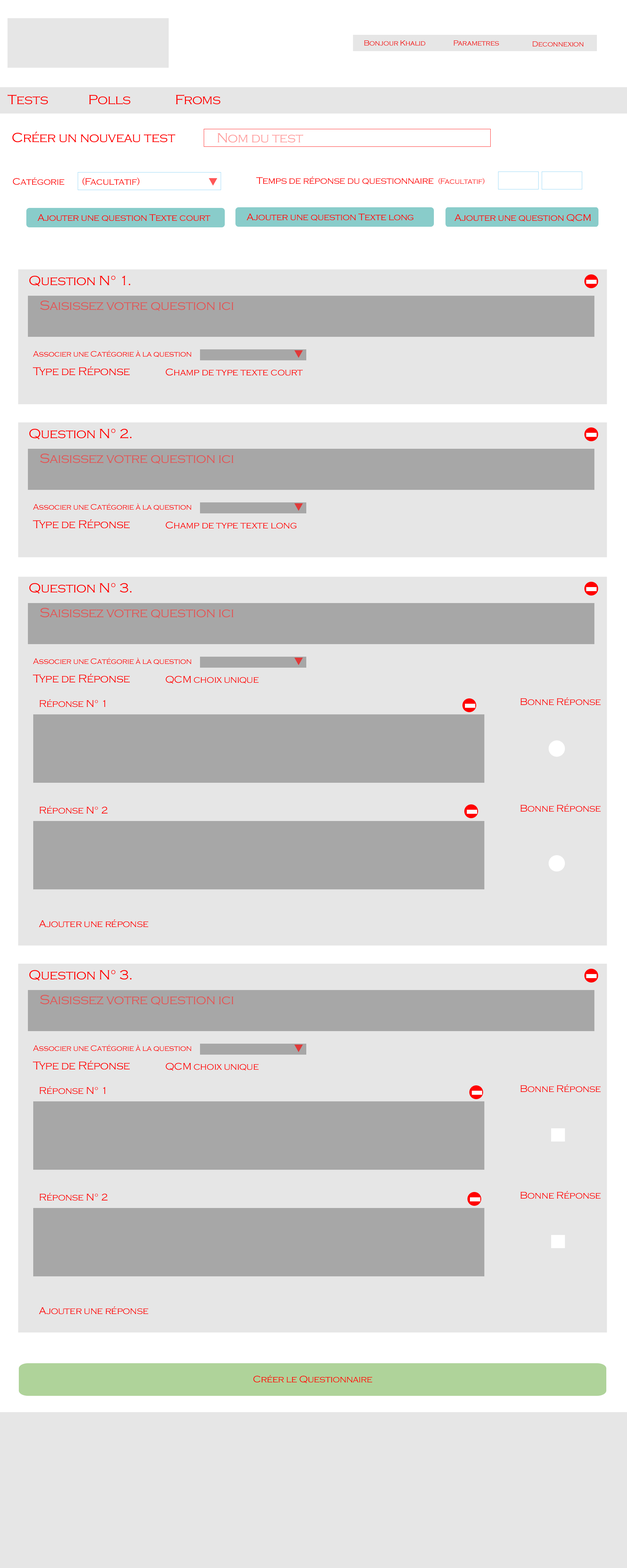
<style>
.page{position:relative;width:627px;height:1568px;background:#e6e6e6}
.page>*{position:absolute;margin:0}
.t1{font:7.5px "CopperplateGothic-Light";letter-spacing:-0.025em;color:#f30000}
.t2{font:13.8px "CopperplateGothic-Light";letter-spacing:-0.025em;color:#ff0000}
.t3{font:13.8px "CopperplateGothic-Light";letter-spacing:-0.025em;color:#ffa1a1}
.t4{font:9.7px "CopperplateGothic-Light";letter-spacing:-0.025em;color:#ff0000}
.t5{font:7.8px "CopperplateGothic-Light";letter-spacing:-0.025em;color:#ff0000}
.t6{font:13.8px "CopperplateGothic-Light";letter-spacing:-0.025em;color:#e05757}
.t7{font:8.2px "CopperplateGothic-Light";letter-spacing:-0.025em;color:#ff0000}
.t8{font:11.6px "CopperplateGothic-Light";letter-spacing:-0.025em;color:#ff0000}
.t9{font:10px "CopperplateGothic-Light";letter-spacing:-0.025em;color:#ff0000}
</style>
<div class="page">
<p class="t1" style="left:364px;top:40px;width:62px;height:6px">Bonjour Khalid</p>
<p class="t1" style="left:454px;top:40px;width:45px;height:6px">Parametres</p>
<p class="t1" style="left:532px;top:41px;width:52px;height:6px">Deconnexion</p>
<p class="t2" style="left:8px;top:94px;width:40px;height:11px">Tests</p>
<p class="t2" style="left:89px;top:95px;width:41px;height:10px">Polls</p>
<p class="t2" style="left:176px;top:94px;width:44px;height:10px">Froms</p>
<p class="t2" style="left:12px;top:132px;width:163px;height:11px">Créer un nouveau test</p>
<p class="t3" style="left:218px;top:133px;width:85px;height:10px">Nom du test</p>
<p class="t4" style="left:13px;top:177px;width:51px;height:8px">Catégorie</p>
<p class="t4" style="left:82px;top:177px;width:58px;height:9px">(Facultatif)</p>
<p class="t4" style="left:256px;top:177px;width:178px;height:8px">Temps de réponse du questionnaire</p>
<p class="t5" style="left:439px;top:178px;width:46px;height:6px">(Facultatif)</p>
<p class="t4" style="left:37px;top:214px;width:173px;height:8px">Ajouter une question Texte court</p>
<p class="t4" style="left:246px;top:213px;width:168px;height:8px">Ajouter une question Texte long</p>
<p class="t4" style="left:454px;top:214px;width:137px;height:8px">Ajouter une question QCM</p>
<p class="t2" style="left:29px;top:276px;width:101px;height:11px">Question N° 1.</p>
<p class="t6" style="left:40px;top:300px;width:194px;height:11px">Saisissez votre question ici</p>
<p class="t7" style="left:33px;top:350px;width:159px;height:8px">Associer une Catégorie à la question</p>
<p class="t8" style="left:33px;top:366px;width:97px;height:10px">Type de Réponse</p>
<p class="t9" style="left:166px;top:368px;width:137px;height:8px">Champ de type texte court</p>
<p class="t2" style="left:29px;top:429px;width:103px;height:11px">Question N° 2.</p>
<p class="t6" style="left:40px;top:453px;width:194px;height:11px">Saisissez votre question ici</p>
<p class="t7" style="left:33px;top:503px;width:159px;height:8px">Associer une Catégorie à la question</p>
<p class="t8" style="left:33px;top:519px;width:97px;height:10px">Type de Réponse</p>
<p class="t9" style="left:166px;top:522px;width:131px;height:7px">Champ de type texte long</p>
<p class="t2" style="left:29px;top:583px;width:103px;height:11px">Question N° 3.</p>
<p class="t6" style="left:40px;top:608px;width:194px;height:11px">Saisissez votre question ici</p>
<p class="t7" style="left:33px;top:658px;width:159px;height:7px">Associer une Catégorie à la question</p>
<p class="t8" style="left:33px;top:674px;width:97px;height:9px">Type de Réponse</p>
<p class="t9" style="left:166px;top:676px;width:93px;height:8px">QCM choix unique</p>
<p class="t9" style="left:40px;top:699px;width:66px;height:8px">Réponse N° 1</p>
<p class="t9" style="left:521px;top:697px;width:80px;height:8px">Bonne Réponse</p>
<p class="t9" style="left:40px;top:806px;width:68px;height:8px">Réponse N° 2</p>
<p class="t9" style="left:521px;top:804px;width:80px;height:8px">Bonne Réponse</p>
<p class="t9" style="left:39px;top:919px;width:109px;height:8px">Ajouter une réponse</p>
<p class="t2" style="left:29px;top:970px;width:103px;height:11px">Question N° 3.</p>
<p class="t6" style="left:40px;top:995px;width:194px;height:11px">Saisissez votre question ici</p>
<p class="t7" style="left:33px;top:1045px;width:159px;height:7px">Associer une Catégorie à la question</p>
<p class="t8" style="left:33px;top:1061px;width:97px;height:9px">Type de Réponse</p>
<p class="t9" style="left:166px;top:1063px;width:93px;height:8px">QCM choix unique</p>
<p class="t9" style="left:521px;top:1084px;width:80px;height:8px">Bonne Réponse</p>
<p class="t9" style="left:40px;top:1086px;width:66px;height:8px">Réponse N° 1</p>
<p class="t9" style="left:40px;top:1193px;width:68px;height:8px">Réponse N° 2</p>
<p class="t9" style="left:521px;top:1191px;width:80px;height:8px">Bonne Réponse</p>
<p class="t9" style="left:39px;top:1306px;width:109px;height:8px">Ajouter une réponse</p>
<p class="t4" style="left:253px;top:1375px;width:119px;height:9px">Créer le Questionnaire</p>
</div>
